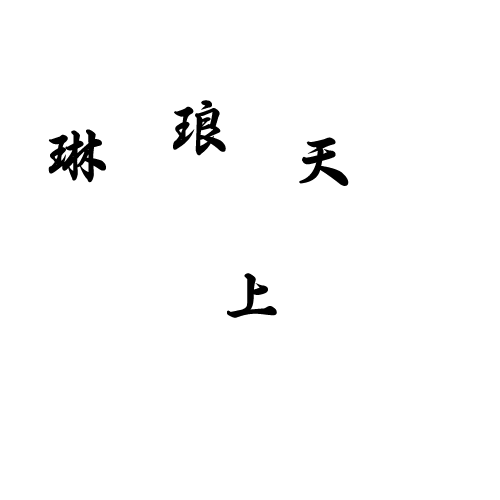
<style>
.page{position:relative;width:500px;height:500px;background:#ffffff}
.page>*{position:absolute;margin:0}
.t1{font:60px "´ºÁª±ê×¼ÐÐÊéÌå";color:#000000}
</style>
<div class="page">
<p class="t1" style="left:173px;top:100px;width:53px;height:56px">琅</p>
<p class="t1" style="left:48px;top:129px;width:58px;height:54px">琳</p>
<p class="t1" style="left:299px;top:137px;width:50px;height:49px">天</p>
<p class="t1" style="left:227px;top:273px;width:50px;height:45px">上</p>
</div>
